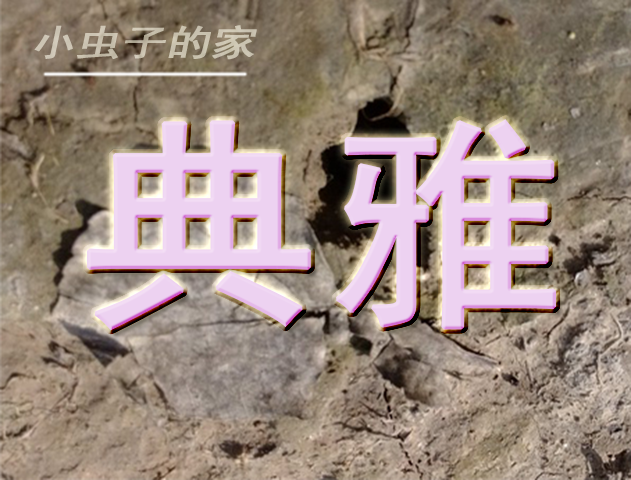
<style>
.page{position:relative;width:631px;height:480px}
.page>*{position:absolute;margin:0}
.t1{font:36.3px "SimHei";color:#c7c2ad;font-weight:bold;font-style:italic;scale:1.21 1}
.t2{font:225.9px "SimHei";color:#ddcee1;font-weight:bold;scale:1.08 1}
</style>
<div class="page">
<p class="t1" style="left:34px;top:25px;width:223px;height:35px;opacity:0.72">小虫子的家</p>
<p class="t2" style="left:87px;top:119px;width:470px;height:212px">典雅</p>
</div>
